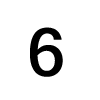
<style>
.page{position:relative;width:100px;height:100px;background:#ffffff}
.page>*{position:absolute;margin:0}
.t1{font:72px "Shruti-Bold";color:#000000}
</style>
<div class="page">
<p class="t1" style="left:30px;top:27px;width:33px;height:50px">6</p>
</div>
